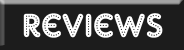
<style>
.page{position:relative;width:184px;height:50px;background:#1c1c1c}
.page>*{position:absolute;margin:0}
.t1{font:33.3px "AdamGorry-Lights";color:#ffffff}
</style>
<div class="page">
<p class="t1" style="left:23px;top:13px;width:140px;height:25px">Reviews</p>
</div>
